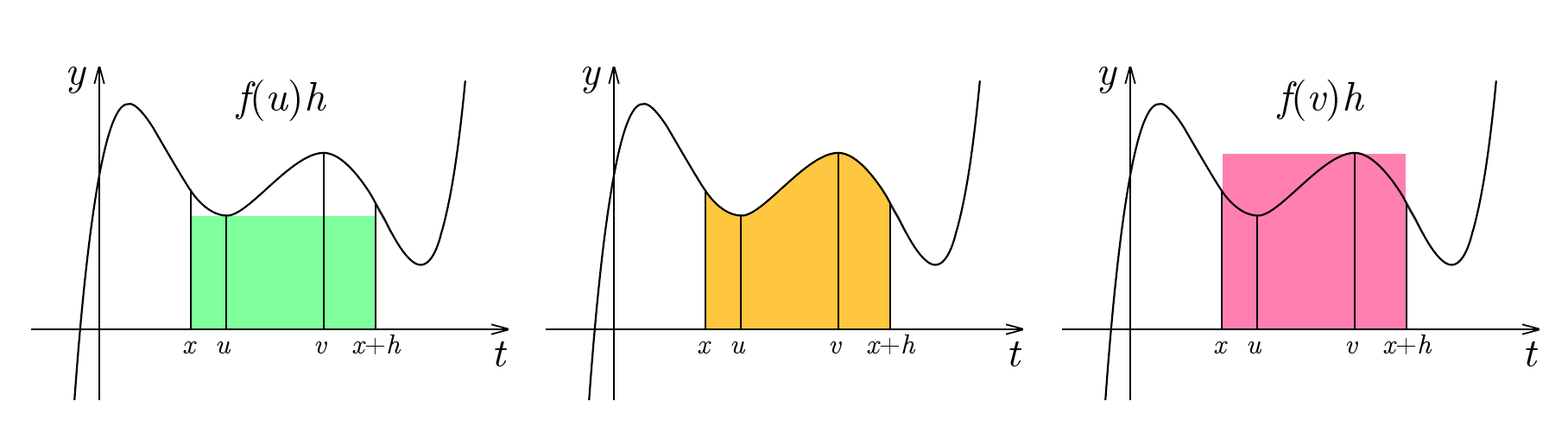
<style>
.page{position:relative;width:1568px;height:446px;background:#ffffff}
.page>*{position:absolute;margin:0}
.t1{font:41.4px "CMUSerif-Italic";color:#000000}
.t2{font:41.4px "CMUSerif-Roman";color:#000000}
.t3{font:27.6px "CMUSerif-Italic";color:#000000}
.t4{font:27.6px "CMUSerif-Roman";color:#000000}
</style>
<div class="page">
<p class="t1" style="left:68px;top:66px;width:18px;height:27px">y</p>
<p class="t1" style="left:583px;top:66px;width:18px;height:27px">y</p>
<p class="t1" style="left:1099px;top:66px;width:18px;height:27px">y</p>
<p class="t1" style="left:235px;top:79px;width:91px;height:42px">f<span class="t2">(</span>u<span class="t2">)</span>h</p>
<p class="t1" style="left:1276px;top:79px;width:88px;height:42px">f<span class="t2">(</span>v<span class="t2">)</span>h</p>
<p class="t3" style="left:183px;top:341px;width:14px;height:12px">x</p>
<p class="t3" style="left:217px;top:341px;width:14px;height:12px">u</p>
<p class="t3" style="left:315px;top:341px;width:12px;height:12px">v</p>
<p class="t3" style="left:352px;top:334px;width:49px;height:20px">x<span class="t4">+</span>h</p>
<p class="t1" style="left:495px;top:341px;width:12px;height:25px">t</p>
<p class="t3" style="left:698px;top:341px;width:13px;height:12px">x</p>
<p class="t3" style="left:731px;top:341px;width:14px;height:12px">u</p>
<p class="t3" style="left:830px;top:341px;width:12px;height:12px">v</p>
<p class="t3" style="left:867px;top:334px;width:49px;height:20px">x<span class="t4">+</span>h</p>
<p class="t1" style="left:1009px;top:341px;width:12px;height:25px">t</p>
<p class="t3" style="left:1214px;top:341px;width:14px;height:12px">x</p>
<p class="t3" style="left:1248px;top:341px;width:13px;height:12px">u</p>
<p class="t3" style="left:1346px;top:341px;width:12px;height:12px">v</p>
<p class="t3" style="left:1383px;top:334px;width:49px;height:20px">x<span class="t4">+</span>h</p>
<p class="t1" style="left:1526px;top:341px;width:12px;height:25px">t</p>
</div>
